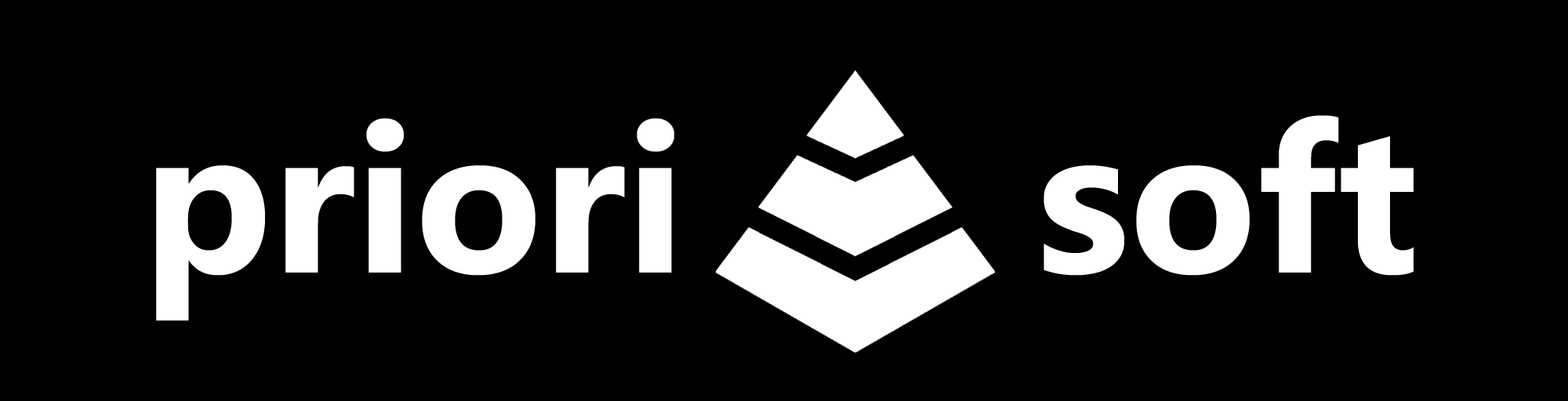
<style>
.page{position:relative;width:1568px;height:401px;background:#000000}
.page>*{position:absolute;margin:0}
.t1{font:209px "Ebrima-Bold";color:#ffffff}
</style>
<div class="page">
<p class="t1" style="left:156px;top:118px;width:518px;height:203px">priori</p>
<p class="t1" style="left:1044px;top:115px;width:370px;height:161px">soft</p>
</div>
